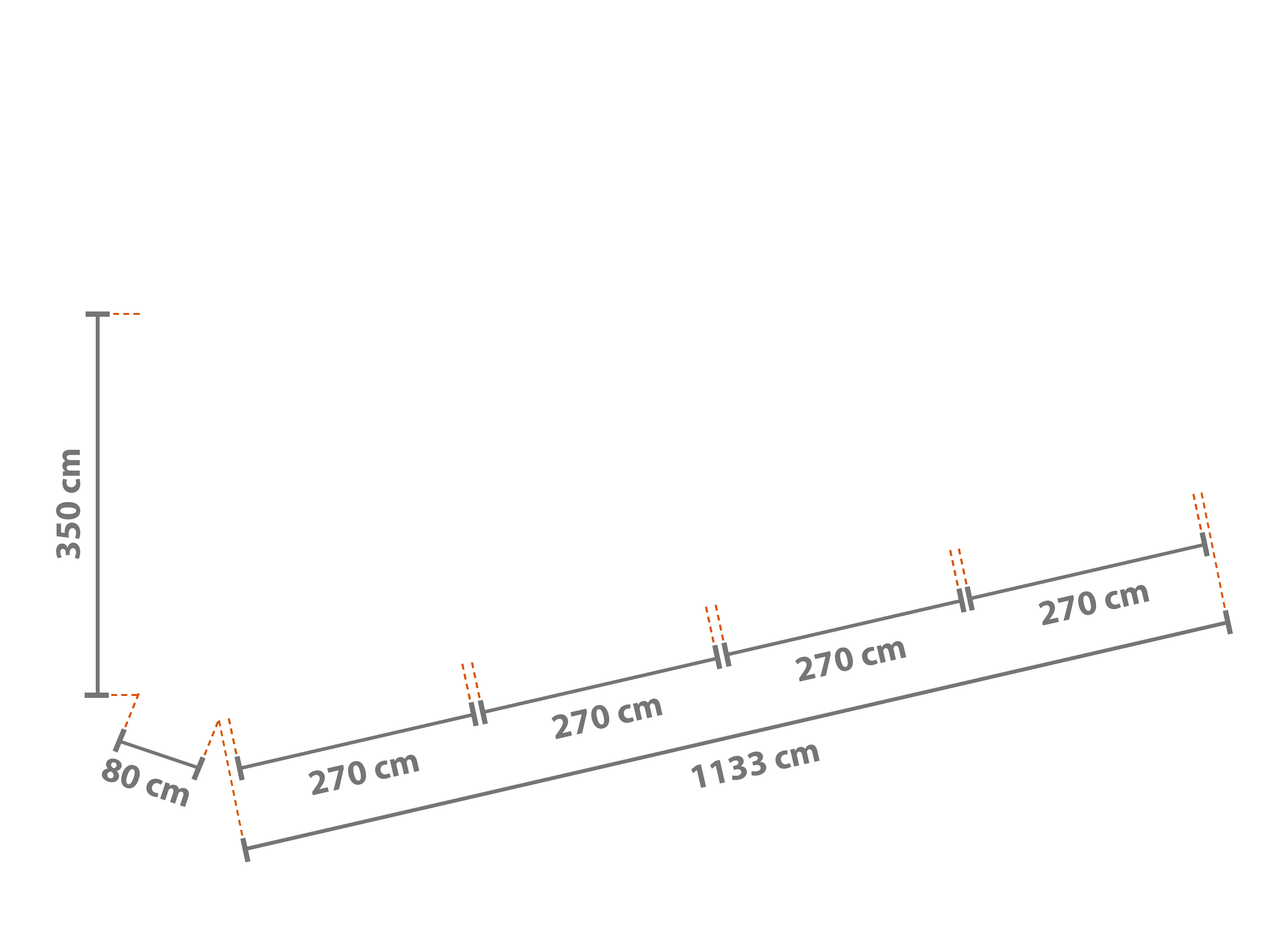
<style>
.page{position:relative;width:1261px;height:946px;background:#ffffff}
.page>*{position:absolute;margin:0}
.t1{font:35.5px "MyriadPro-Bold";color:#757575}
</style>
<div class="page">
<p class="t1" style="left:56px;top:450px;width:24px;height:109px;rotate:-90deg">350 cm</p>
<p class="t1" style="left:1038px;top:585px;width:112px;height:41px;rotate:-13deg">270 cm</p>
<p class="t1" style="left:795px;top:641px;width:112px;height:41px;rotate:-13deg">270 cm</p>
<p class="t1" style="left:551px;top:698px;width:112px;height:41px;rotate:-13deg">270 cm</p>
<p class="t1" style="left:691px;top:744px;width:129px;height:44px;rotate:-13deg">1133 cm</p>
<p class="t1" style="left:102px;top:758px;width:87px;height:49px;text-align:center;rotate:18deg">80 cm<br> cm</p>
<p class="t1" style="left:308px;top:754px;width:112px;height:41px;rotate:-13deg">270 cm</p>
</div>
